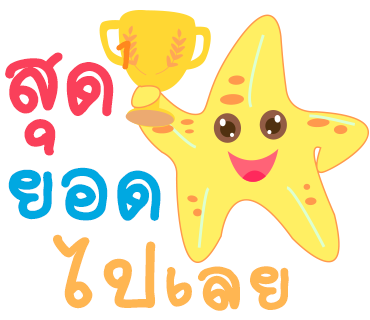
<style>
.page{position:relative;width:370px;height:320px;background:#ffffff}
.page>*{position:absolute;margin:0}
.t1{font:83px "2005_iannnnnMTV";letter-spacing:0.025em;color:#ff881e;scale:1.06 1}
.t2{font:147px "2005_iannnnnMTV";color:#fa405a;scale:1.06 1}
.t3{font:137px "2005_iannnnnMTV";color:#00a8e1;scale:1.06 1}
.t4{font:121px "2005_iannnnnMTV";letter-spacing:0.025em;color:#ffb652;scale:1.06 1}
.t5{font:141px "2005_iannnnnMTV";letter-spacing:0.025em;color:#ffb652;scale:1.06 1}
</style>
<div class="page">
<p class="t1" style="left:116px;top:40px;width:15px;height:30px;rotate:5deg">1</p>
<p class="t2" style="left:5px;top:52px;width:109px;height:104px">สุด</p>
<p class="t3" style="left:8px;top:167px;width:153px;height:54px">ยอด</p>
<p class="t4" style="left:53px;top:234px;width:236px;height:77px"><span class="t5">ไป</span>เลย</p>
</div>
